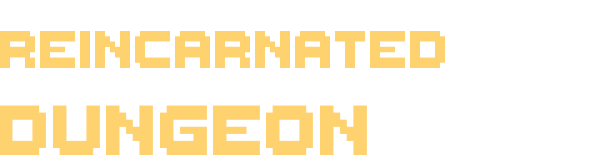
<style>
.page{position:relative;width:597px;height:155px;background:#ffffff}
.page>*{position:absolute;margin:0}
.t1{font:84.4px "ThaleahFat";color:#ffd270;scale:0.95 1}
.t2{font:112.6px "ThaleahFat";color:#ffd270;scale:0.95 1}
</style>
<div class="page">
<p class="t1" style="left:0px;top:31px;width:445px;height:37px">Reincarnated</p>
<p class="t2" style="left:0px;top:105px;width:367px;height:50px">Dungeon</p>
</div>
